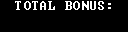
<style>
.page{position:relative;width:128px;height:32px;background:#000000}
.page>*{position:absolute;margin:0}
.t1{font:12px "Terminal";letter-spacing:0.075em;color:#ffffff}
</style>
<div class="page">
<p class="t1" style="left:15px;top:1px;width:96px;height:9px">TOTAL BONUS:</p>
</div>
